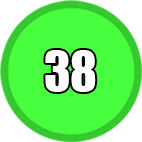
<style>
.page{position:relative;width:142px;height:142px;background:#47ff3e}
.page>*{position:absolute;margin:0}
.t1{font:50px "Impact";color:#ffffff}
</style>
<div class="page">
<p class="t1" style="left:45px;top:50px;width:51px;height:42px">38</p>
</div>
